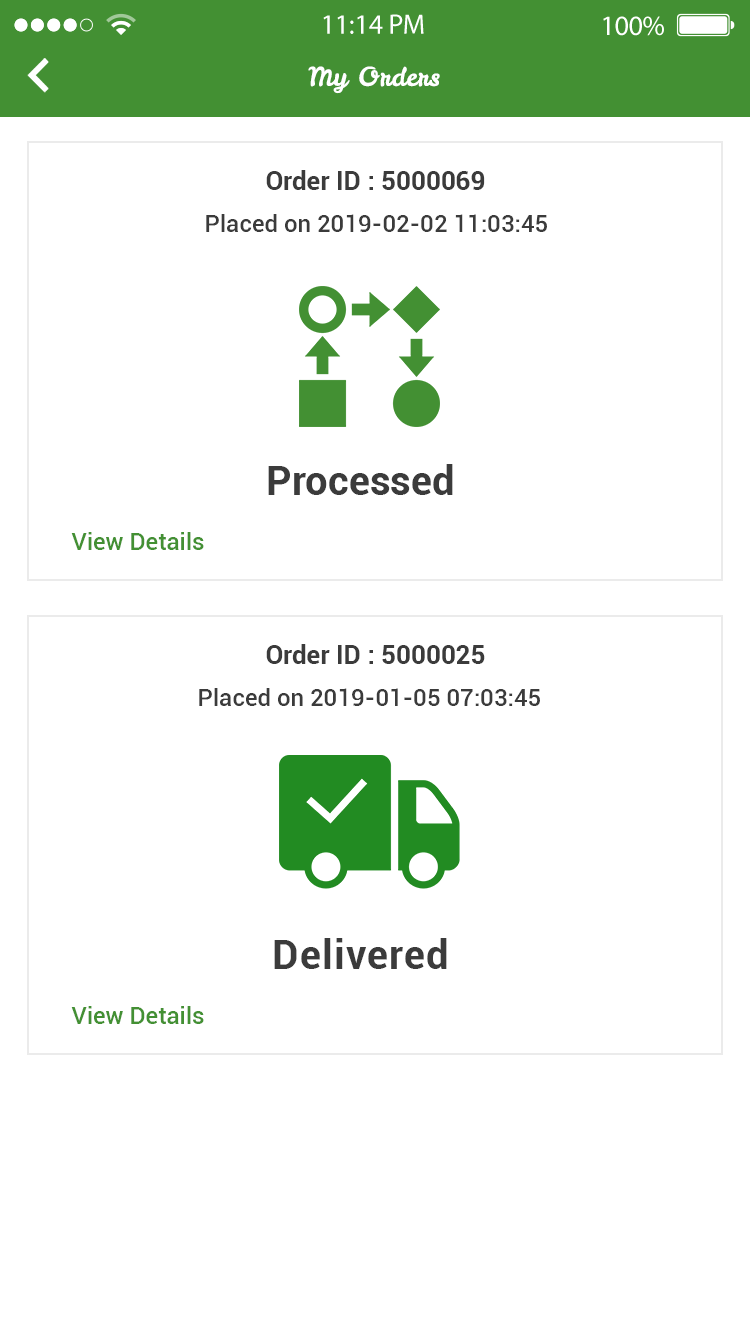
<style>
.page{position:relative;width:750px;height:1334px;background:#ffffff}
.page>*{position:absolute;margin:0}
.t1{font:26px "LeckerliOne-Regular";color:#ffffff}
.t2{font:26px "Roboto-Bold";color:#3b3b3b}
.t3{font:24px "Roboto-Medium";color:#3b3b3b}
.t4{font:40px "Roboto-Bold";color:#3b3b3b}
.t5{font:24px "Roboto-Medium";color:#439033}
.t6{font:40px "Roboto-Bold";letter-spacing:0.03em;color:#3b3b3b}
</style>
<div class="page">
<p class="t1" style="left:308px;top:66px;width:132px;height:28px">My Orders</p>
<p class="t2" style="left:266px;top:170px;width:219px;height:20px">Order ID : 5000069</p>
<p class="t3" style="left:206px;top:214px;width:341px;height:18px">Placed on 2019-02-02 11:03:45</p>
<p class="t4" style="left:268px;top:464px;width:185px;height:31px">Processed</p>
<p class="t5" style="left:71px;top:532px;width:133px;height:18px">View Details</p>
<p class="t2" style="left:266px;top:644px;width:219px;height:20px">Order ID : 5000025</p>
<p class="t3" style="left:199px;top:688px;width:341px;height:18px">Placed on 2019-01-05 07:03:45</p>
<p class="t6" style="left:274px;top:938px;width:173px;height:31px">Delivered</p>
<p class="t5" style="left:71px;top:1006px;width:133px;height:18px">View Details</p>
</div>
